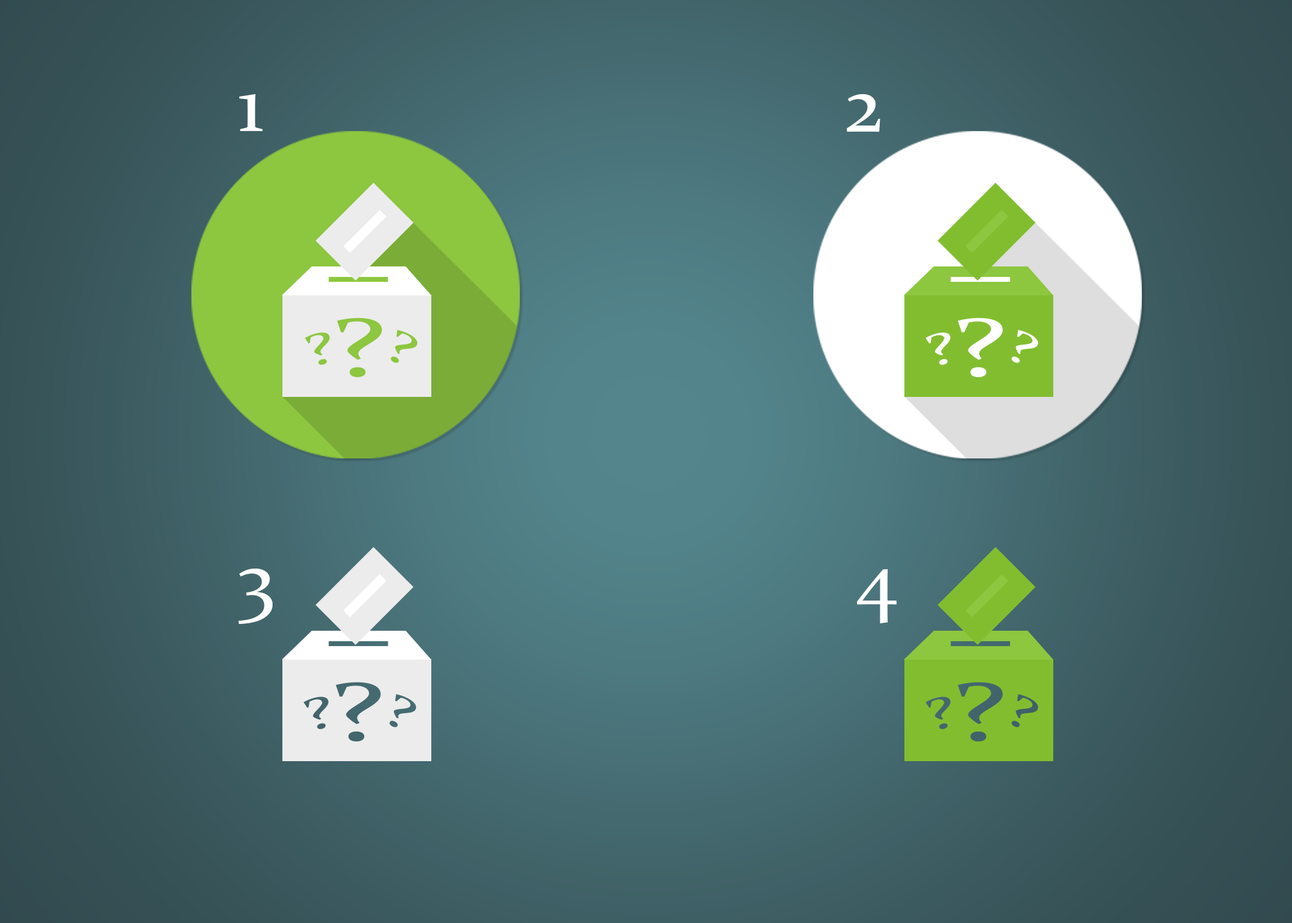
<style>
.page{position:relative;width:1292px;height:923px}
.page>*{position:absolute;margin:0}
.t1{font:80.3px "Constantia";color:#ffffff}
.t2{font:20.5px "Constantia";color:#8dc63f;scale:1.58 1}
.t3{font:11.1px "Constantia";color:#8dc63f;scale:1.58 1}
</style>
<div class="page">
<p class="t1" style="left:239px;top:94px;width:24px;height:37px">1</p>
<p class="t1" style="left:847px;top:94px;width:33px;height:38px">2</p>
<p class="t2" style="left:337px;top:317px;width:45px;height:60px">?</p>
<p class="t3" style="left:391px;top:330px;width:27px;height:33px;rotate:26deg">?</p>
<p class="t3" style="left:305px;top:332px;width:25px;height:33px;rotate:-15deg">?</p>
<p class="t1" style="left:238px;top:569px;width:35px;height:55px">3</p>
<p class="t1" style="left:856px;top:569px;width:41px;height:54px">4</p>
</div>
